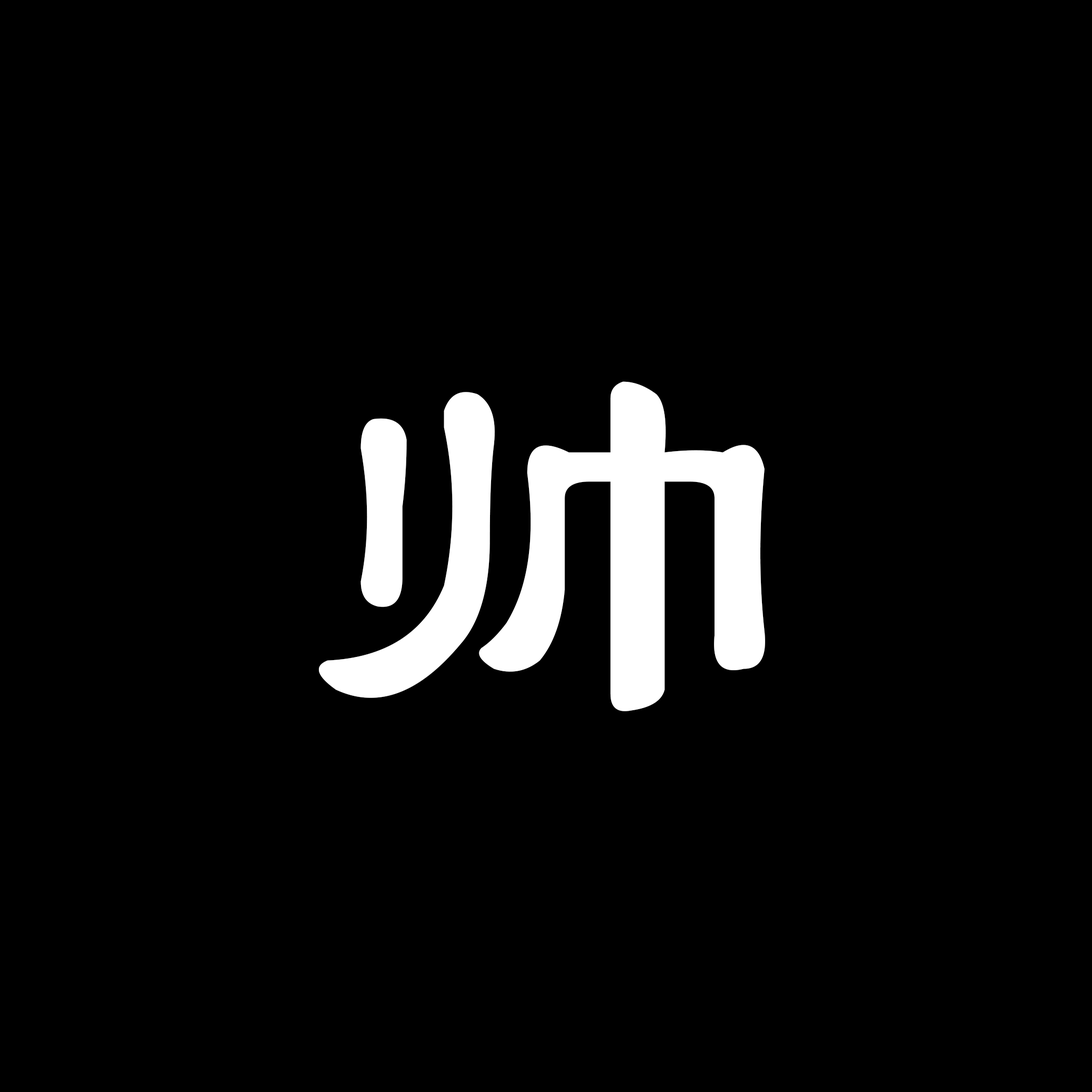
<style>
.page{position:relative;width:1092px;height:1092px;background:#000000}
.page>*{position:absolute;margin:0}
.t1{font:532.7px "LiSu";color:#ffffff}
</style>
<div class="page">
<p class="t1" style="left:318px;top:381px;width:447px;height:330px">帅</p>
</div>
